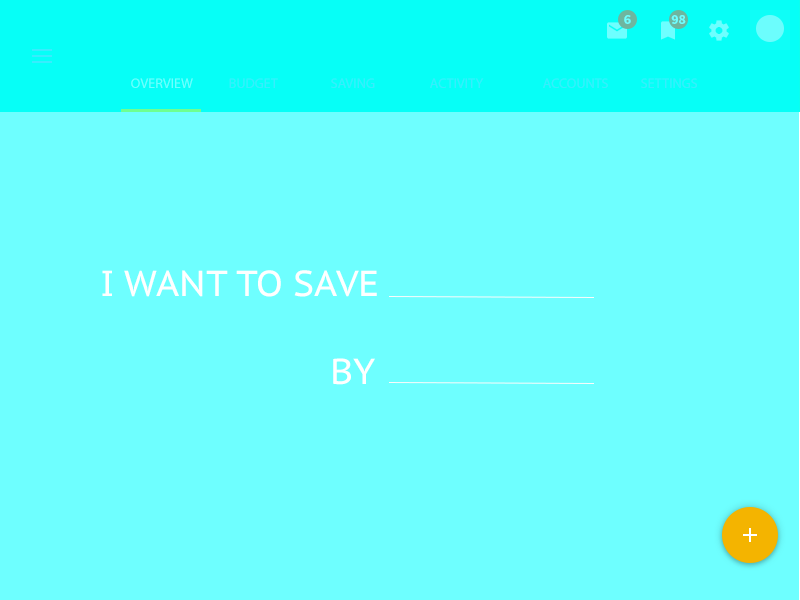
<style>
.page{position:relative;width:800px;height:600px;background:#6effff}
.page>*{position:absolute;margin:0}
.t1{font:14px "SourceSansPro-Bold";color:#6effff}
.t2{font:14px "MyriadPro-Regular";color:#6effff;text-transform:uppercase}
.t3{font:14px "MyriadPro-Regular";color:#38ecfd;text-transform:uppercase}
.t4{font:36px "PTSans-Caption";color:#ffffff;text-transform:uppercase}
</style>
<div class="page">
<p class="t1" style="left:624px;top:15px;width:7px;height:9px">6</p>
<p class="t1" style="left:671px;top:15px;width:15px;height:9px">98</p>
<p class="t2" style="left:131px;top:78px;width:62px;height:10px">OVERVIEW</p>
<p class="t3" style="left:229px;top:78px;width:49px;height:10px">budget</p>
<p class="t3" style="left:331px;top:78px;width:44px;height:10px">Saving</p>
<p class="t3" style="left:430px;top:78px;width:54px;height:10px">Activity</p>
<p class="t3" style="left:543px;top:78px;width:65px;height:10px">Accounts</p>
<p class="t3" style="left:641px;top:78px;width:56px;height:10px">Settings</p>
<p class="t4" style="left:102px;top:270px;width:275px;height:27px">I WANT TO SAVE</p>
<p class="t4" style="left:333px;top:358px;width:42px;height:27px">By</p>
</div>
